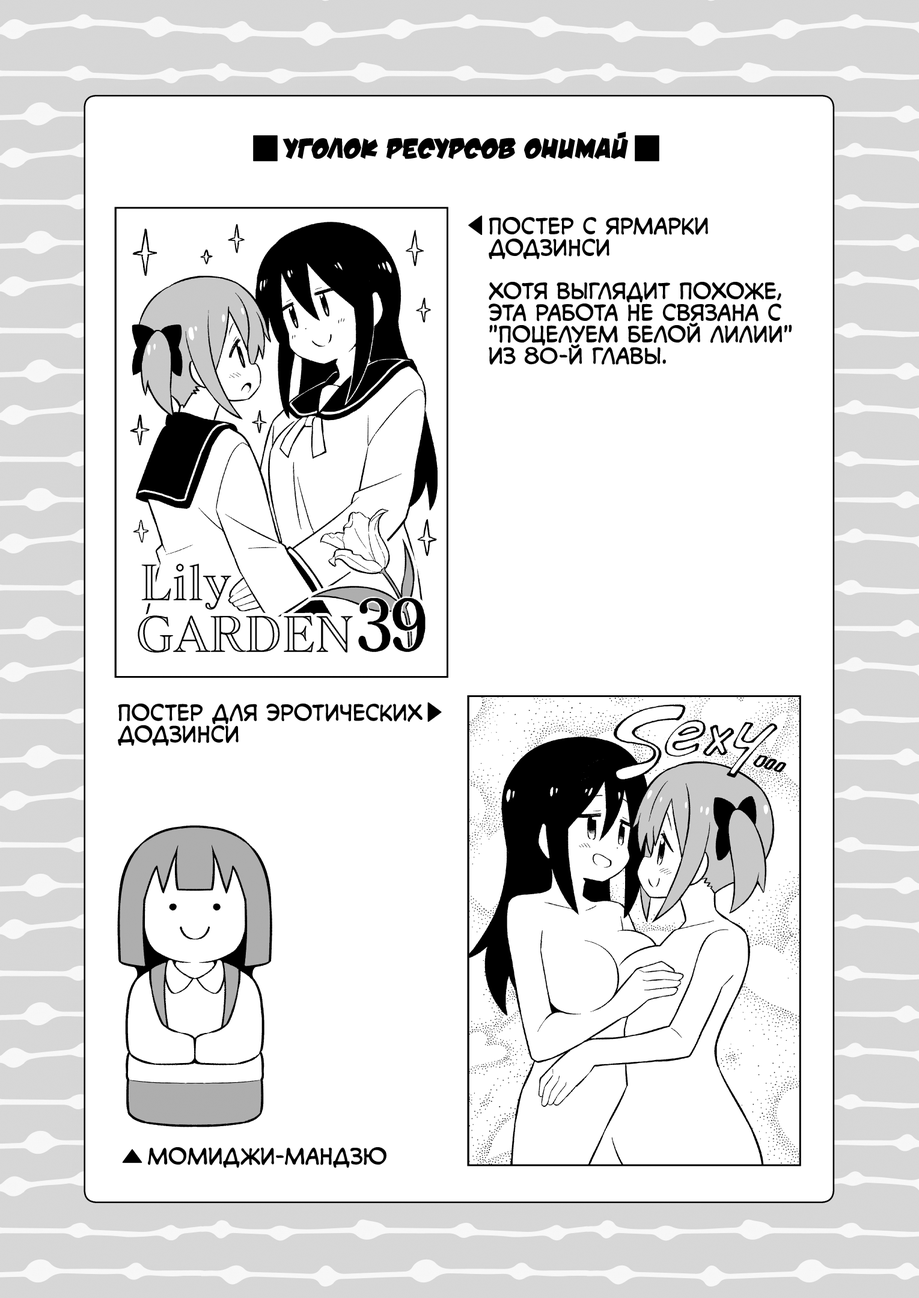
<style>
.page{position:relative;width:919px;height:1298px;background:#ffffff}
.page>*{position:absolute;margin:0}
.t1{font:28.8px "v_DamnNoisyKids";color:#000000;text-transform:uppercase}
.t2{font:21.6px "v_CCMonologous";color:#000000;text-transform:uppercase}
</style>
<div class="page">
<p class="t1" style="left:282px;top:132px;width:346px;height:27px">Уголок ресурсов Онимай</p>
<p class="t2" style="left:489px;top:217px;width:303px;height:148px">Постер с ярмарки<br>додзинси<br><br>Хотя выглядит похоже,<br>эта работа не связана с<br>"Поцелуем белой лилии"<br>из 80-й главы.</p>
<p class="t2" style="left:118px;top:703px;width:304px;height:43px">Постер для эротических<br>додзинси</p>
<p class="t2" style="left:148px;top:1147px;width:238px;height:21px">Момиджи-мандзю</p>
</div>
